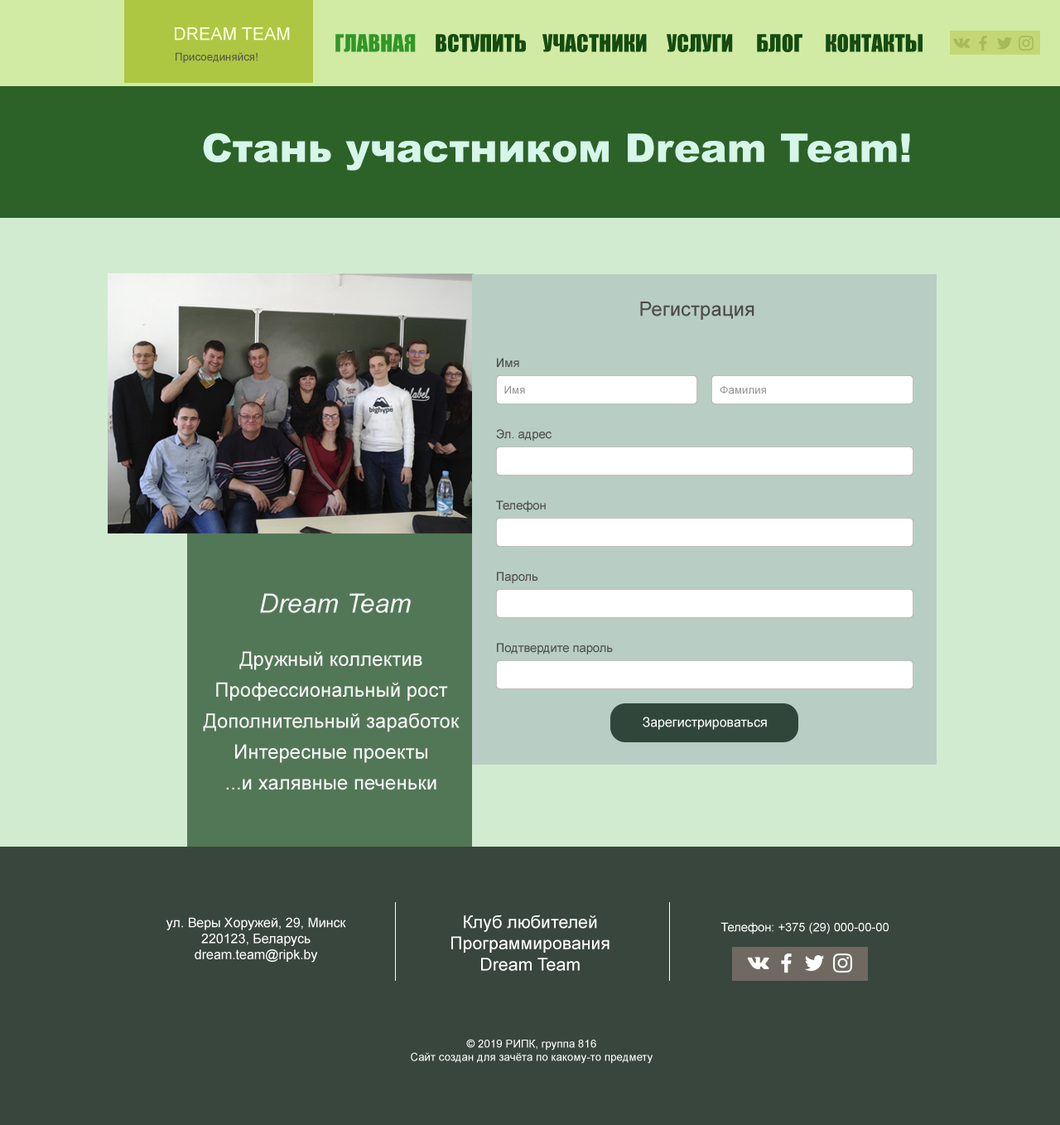
<style>
.page{position:relative;width:1060px;height:1125px;background:#39463d}
.page>*{position:absolute;margin:0}
.t1{font:17.7px "ArialMT";color:#fcffdf}
.t2{font:22.2px "Impact";color:#319728}
.t3{font:22.2px "Impact";color:#154c10}
.t4{font:11px "ArialMT";color:#53554b}
.t5{font:39.8px "Arial-Black";color:#d5f6e9}
.t6{font:19.9px "ArialMT";color:#4c4c4c}
.t7{font:12.1px "ArialMT";color:#4c4c4c}
.t8{font:11px "ArialMT";color:#979797}
.t9{font:26.5px "Arial-ItalicMT";color:#f5f5f5}
.t10{font:19.9px/30.9px "ArialMT";color:#f5f5f5}
.t11{font:13.3px "ArialMT";color:#ffffff}
.t12{font:17.7px "ArialMT";color:#ffffff}
.t13{font:12.1px "ArialMT";color:#ffffff}
.t14{font:11px "ArialMT";color:#ffffff}
</style>
<div class="page">
<p class="t1" style="left:175px;top:27px;width:115px;height:14px">DREAM TEAM</p>
<p class="t2" style="left:335px;top:34px;width:81px;height:18px">ГЛАВНАЯ</p>
<p class="t3" style="left:436px;top:34px;width:90px;height:18px">ВСТУПИТЬ</p>
<p class="t3" style="left:543px;top:34px;width:104px;height:18px">УЧАСТНИКИ</p>
<p class="t3" style="left:667px;top:34px;width:66px;height:18px">УСЛУГИ</p>
<p class="t3" style="left:757px;top:34px;width:46px;height:18px">БЛОГ</p>
<p class="t3" style="left:826px;top:34px;width:97px;height:18px">КОНТАКТЫ</p>
<p class="t4" style="left:176px;top:52px;width:82px;height:11px">Присоединяйся!</p>
<p class="t5" style="left:203px;top:133px;width:707px;height:38px">Стань участником Dream Team!</p>
<p class="t6" style="left:640px;top:301px;width:115px;height:19px">Регистрация</p>
<p class="t7" style="left:497px;top:358px;width:22px;height:9px">Имя</p>
<p class="t8" style="left:504px;top:385px;width:21px;height:9px">Имя</p>
<p class="t8" style="left:720px;top:385px;width:46px;height:9px">Фамилия</p>
<p class="t7" style="left:496px;top:429px;width:56px;height:12px">Эл. адрес</p>
<p class="t7" style="left:496px;top:500px;width:50px;height:12px">Телефон</p>
<p class="t7" style="left:497px;top:571px;width:41px;height:12px">Пароль</p>
<p class="t9" style="left:260px;top:593px;width:151px;height:20px">Dream Team</p>
<p class="t10" style="left:203px;top:651px;width:257px;height:139px;text-align:center">Дружный коллектив<br>Профессиональный рост<br>Дополнительный заработок<br>Интересные проекты<br>...и халявные печеньки</p>
<p class="t7" style="left:497px;top:643px;width:116px;height:11px">Подтвердите пароль</p>
<p class="t11" style="left:643px;top:716px;width:124px;height:14px">Зарегистрироваться</p>
<p class="t11" style="left:166px;top:917px;width:180px;height:45px;text-align:center">ул. Веры Хоружей, 29, Минск<br>220123, Беларусь<br>dream.team@ripk.by</p>
<p class="t12" style="left:451px;top:914px;width:159px;height:57px;text-align:center">Клуб любителей<br>Программирования<br>Dream Team</p>
<p class="t13" style="left:721px;top:922px;width:168px;height:12px">Телефон: +375 (29) 000-00-00</p>
<p class="t14" style="left:411px;top:1039px;width:242px;height:24px;text-align:center">© 2019 РИПК, группа 816<br>Сайт создан для зачёта по какому-то предмету</p>
</div>
